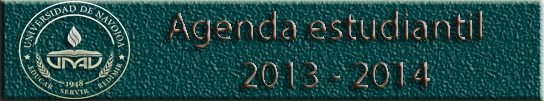
<style>
.page{position:relative;width:544px;height:101px}
.page>*{position:absolute;margin:0}
.t1{font:40px "MyriadPro-Regular"}
</style>
<div class="page">
<p class="t1" style="left:167px;top:11px;width:315px;height:77px">Agenda estudiantil<br>2013 - 2014</p>
</div>
